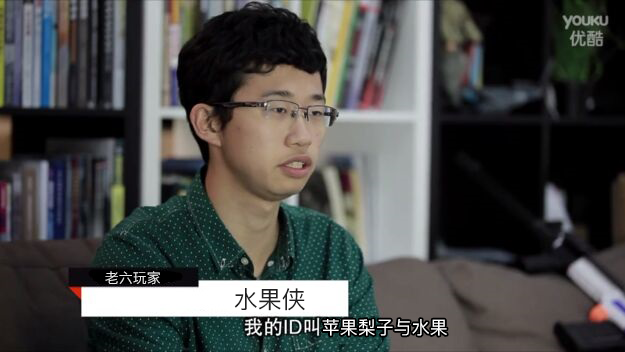
<style>
.page{position:relative;width:625px;height:352px}
.page>*{position:absolute;margin:0}
.t1{font:14px "PingFang-SC-Medium";color:#e7e7e7}
.t2{font:24px "PingFang-SC-Medium";color:#212121}
.t3{font:18px "PingFang-SC-Medium";color:#ffffff}
</style>
<div class="page">
<p class="t1" style="left:105px;top:271px;width:55px;height:14px">老六玩家</p>
<p class="t2" style="left:234px;top:288px;width:71px;height:23px">水果侠</p>
<p class="t3" style="left:322px;top:319px;width:125px;height:17px">苹果梨子与水果</p>
</div>
